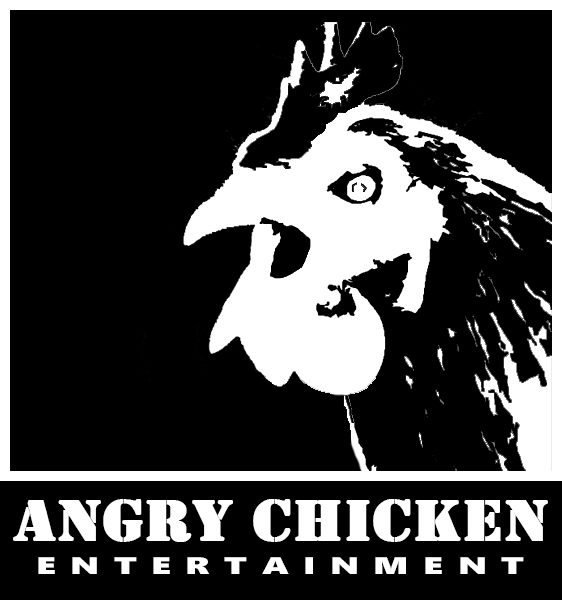
<style>
.page{position:relative;width:562px;height:600px;background:#000000}
.page>*{position:absolute;margin:0}
.t1{font:60px "Stencil";color:#ffffff;font-weight:bold;scale:1.1 1}
.t2{font:24px "SegoeUIBlack";letter-spacing:0.4em;color:#ffffff;scale:1.5 1}
</style>
<div class="page">
<p class="t1" style="left:13px;top:499px;width:535px;height:43px">Angry Chicken</p>
<p class="t2" style="left:38px;top:557px;width:486px;height:17px">ENTERTAINMENT</p>
</div>
